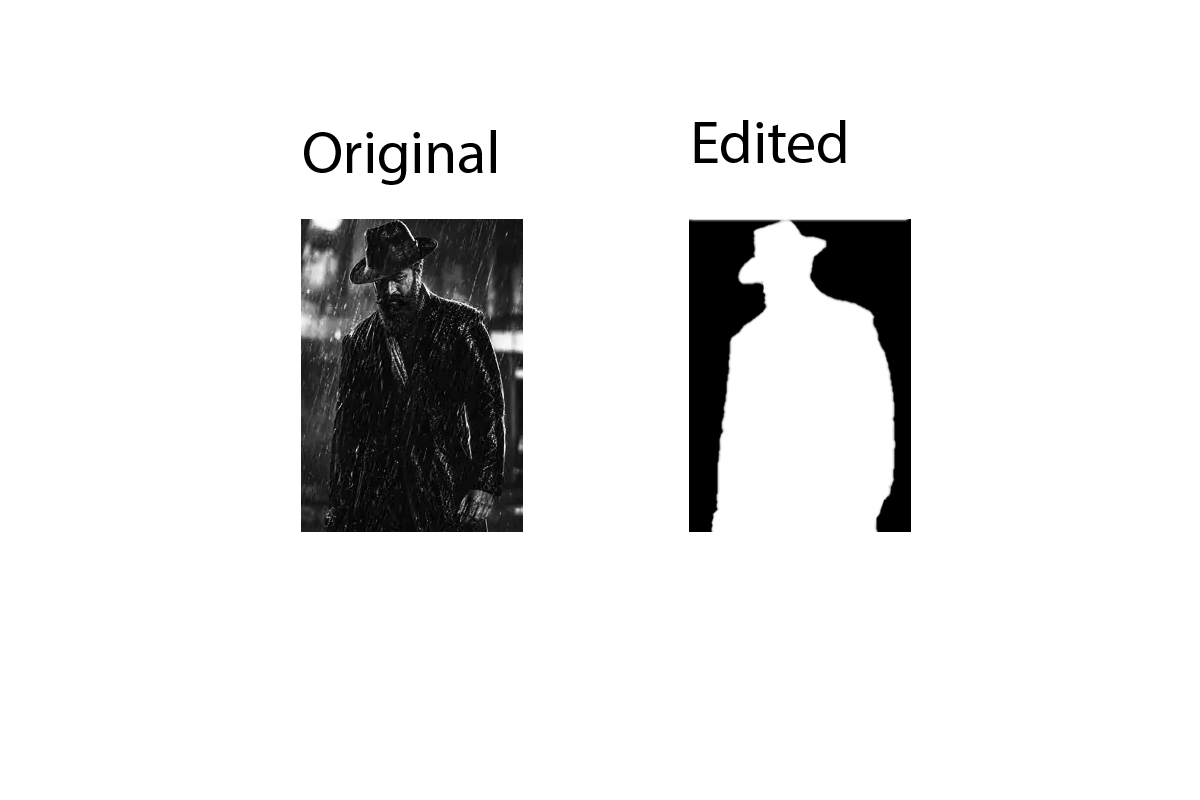
<style>
.page{position:relative;width:1200px;height:800px;background:#ffffff}
.page>*{position:absolute;margin:0}
.t1{font:60px "MyriadPro-Regular";color:#000000}
</style>
<div class="page">
<p class="t1" style="left:694px;top:120px;width:152px;height:43px">Edited</p>
<p class="t1" style="left:304px;top:130px;width:192px;height:55px">Original</p>
</div>
